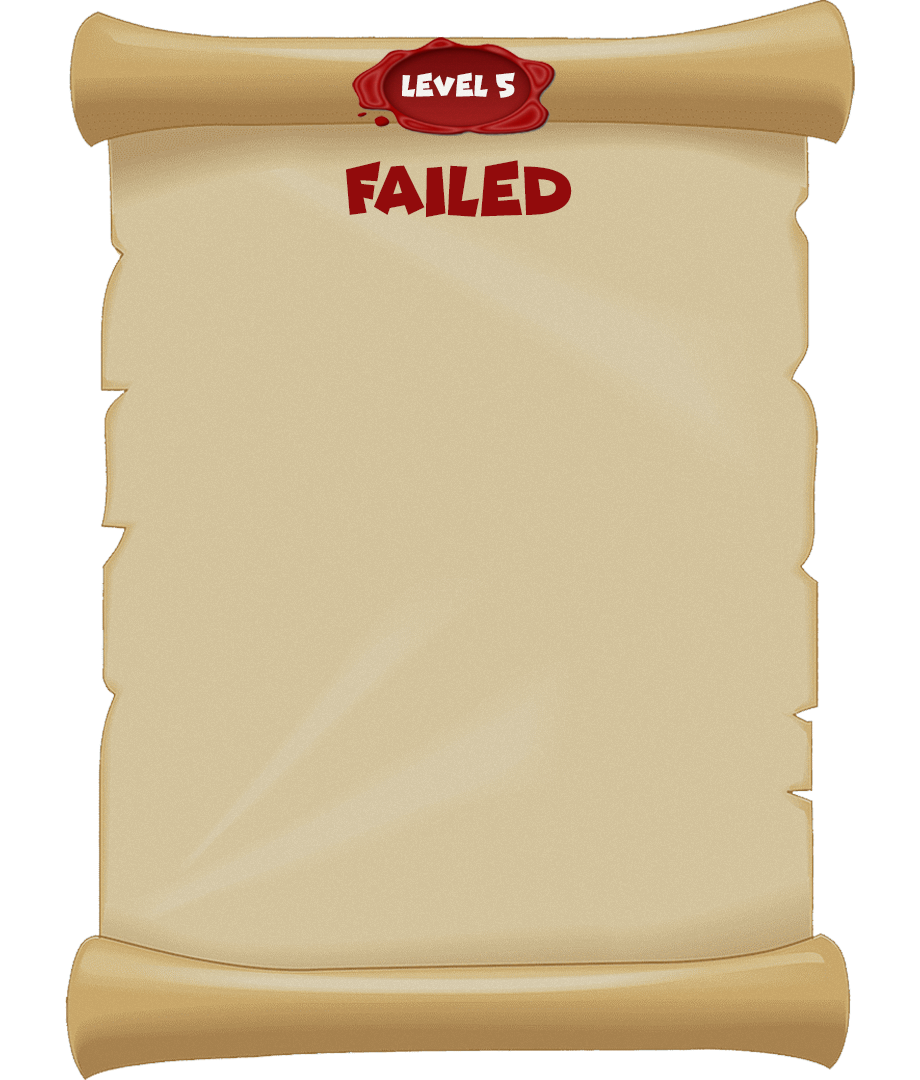
<style>
.page{position:relative;width:920px;height:1080px;background:#ffffff}
.page>*{position:absolute;margin:0}
.t1{font:30.2px "Funhouse";color:#ffffff}
.t2{font:71.1px "Funhouse";color:#920b0c}
</style>
<div class="page">
<p class="t1" style="left:402px;top:72px;width:113px;height:26px">level 5</p>
<p class="t2" style="left:346px;top:160px;width:226px;height:58px">Failed</p>
</div>
